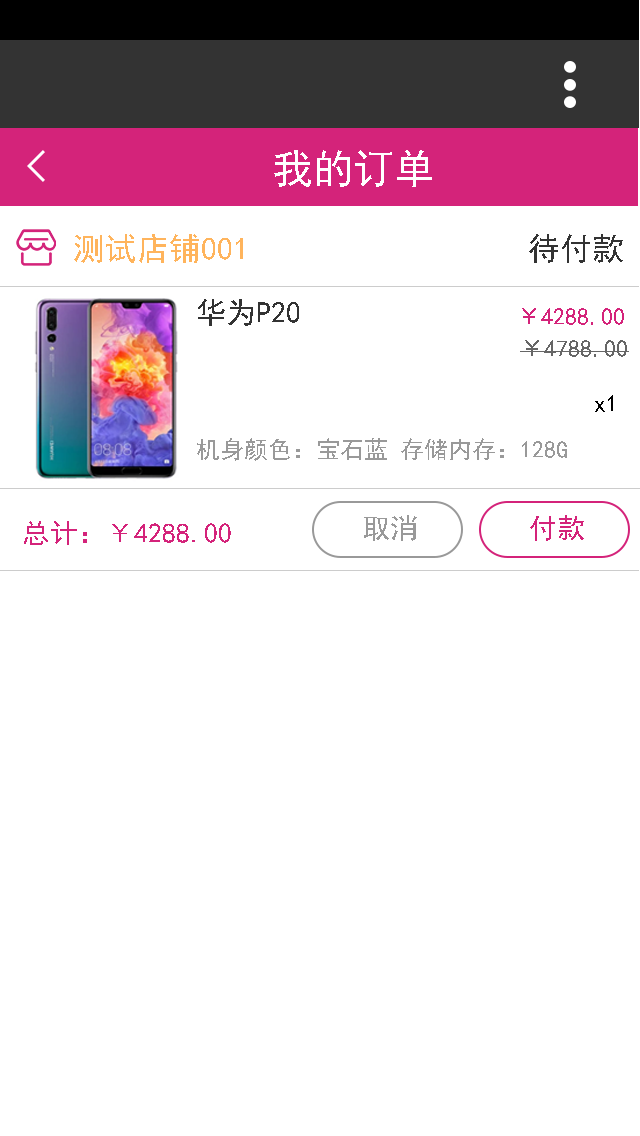
<style>
.page{position:relative;width:640px;height:1136px;background:#ffffff}
.page>*{position:absolute;margin:0}
.t1{font:70px "SimHei";color:#ffffff}
.t2{font:55px "SimHei";color:#ffb45c}
.t3{font:55px "SimHei";color:#333333}
.t4{font:30px "SimHei";color:#333333}
.t5{font:24px "SimHei";color:#d4237a}
.t6{font:24px "SimHei";color:#666666}
.t7{font:24px "SimHei";color:#000000}
.t8{font:24px "SimHei";color:#999999}
.t9{font:48px "SimHei";color:#d4237a}
.t10{font:48px "SimHei";color:#999999}
</style>
<div class="page">
<p class="t1" style="left:274px;top:150px;width:158px;height:37px">我的订单</p>
<p class="t2" style="left:74px;top:234px;width:169px;height:29px">测试店铺001</p>
<p class="t3" style="left:529px;top:234px;width:94px;height:29px">待付款</p>
<p class="t4" style="left:198px;top:299px;width:101px;height:27px">华为P20</p>
<p class="t5" style="left:522px;top:308px;width:102px;height:17px">￥4288.00</p>
<p class="t6" style="left:520px;top:340px;width:109px;height:17px">￥4788.00</p>
<p class="t7" style="left:595px;top:395px;width:18px;height:17px">x1</p>
<p class="t8" style="left:197px;top:438px;width:370px;height:23px">机身颜色：宝石蓝 存储内存：128G</p>
<p class="t9" style="left:24px;top:521px;width:207px;height:24px">总计：￥4288.00</p>
<p class="t10" style="left:364px;top:515px;width:53px;height:26px">取消</p>
<p class="t9" style="left:530px;top:515px;width:54px;height:26px">付款</p>
</div>
